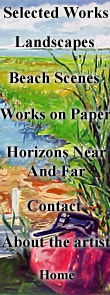
<style>
.page{position:relative;width:110px;height:295px}
.page>*{position:absolute;margin:0}
.t1{font:16px "TimesNewRomanPS-BoldMT";color:#000000}
.t2{font:14px "TimesNewRomanPS-BoldMT";color:#000000}
</style>
<div class="page">
<p class="t1" style="left:4px;top:6px;width:104px;height:12px">Selected Works</p>
<p class="t1" style="left:14px;top:36px;width:80px;height:15px">Landscapes</p>
<p class="t1" style="left:9px;top:72px;width:90px;height:12px">Beach Scenes</p>
<p class="t1" style="left:0px;top:108px;width:111px;height:15px">Works on Paper</p>
<p class="t1" style="left:6px;top:146px;width:100px;height:31px;text-align:center">Horizons Near<br>And Far</p>
<p class="t1" style="left:27px;top:200px;width:54px;height:12px">Contact</p>
<p class="t1" style="left:1px;top:236px;width:109px;height:12px">About the artist</p>
<p class="t2" style="left:39px;top:270px;width:36px;height:10px">Home</p>
</div>
